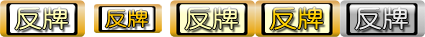
<style>
.page{position:relative;width:425px;height:37px}
.page>*{position:absolute;margin:0}
.t1{font:23.3px "YouYuan";color:#fffeb0;font-weight:bold;scale:1.14 1}
.t2{font:18.6px "YouYuan";color:#ffc600;font-weight:bold;scale:1.14 1}
.t3{font:23.3px "YouYuan";color:#ffd100;font-weight:bold;scale:1.14 1}
.t4{font:23.3px "YouYuan";color:#eaeaea;font-weight:bold;scale:1.14 1}
</style>
<div class="page">
<p class="t1" style="left:15px;top:7px;width:53px;height:23px">反牌</p>
<p class="t2" style="left:105px;top:9px;width:43px;height:19px">反牌</p>
<p class="t1" style="left:185px;top:7px;width:53px;height:23px">反牌</p>
<p class="t3" style="left:270px;top:7px;width:53px;height:23px">反牌</p>
<p class="t4" style="left:355px;top:7px;width:53px;height:23px">反牌</p>
</div>
